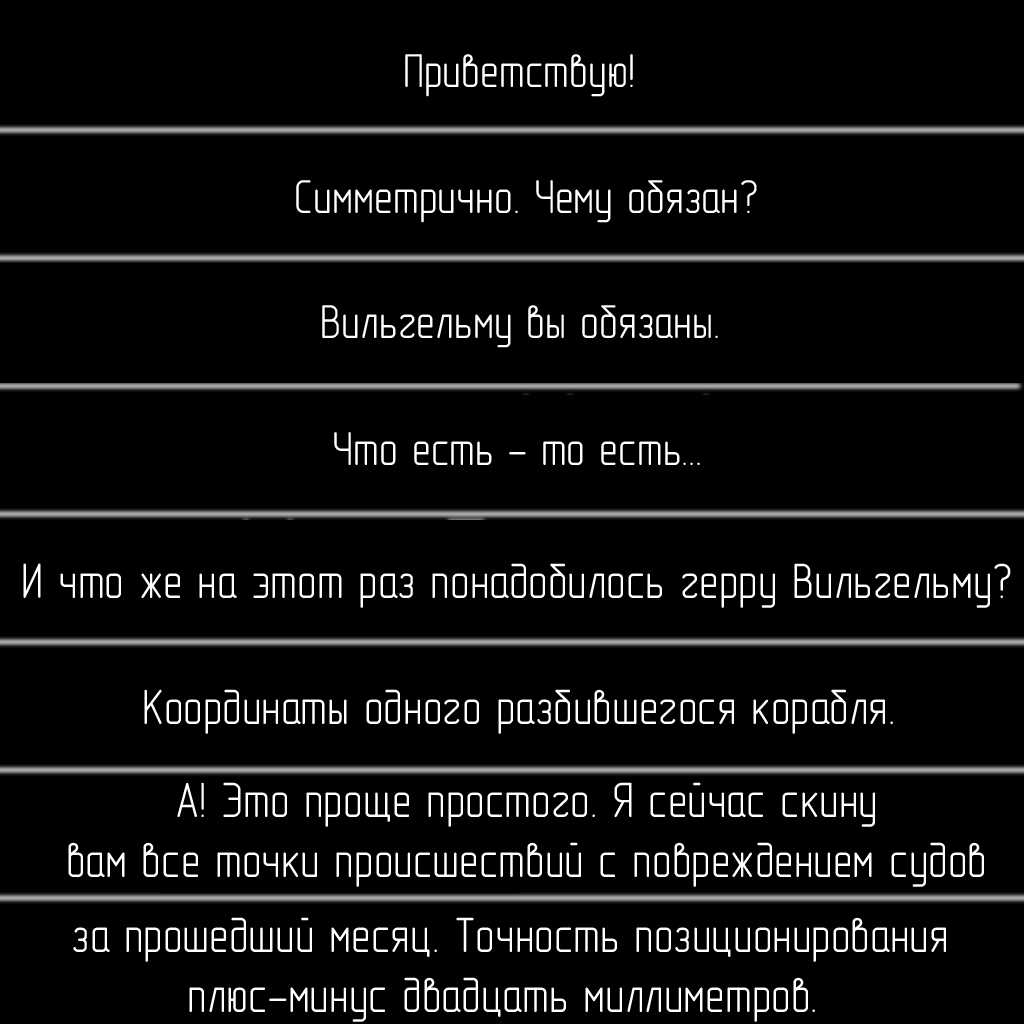
<style>
.page{position:relative;width:1024px;height:1024px;background:#000000}
.page>*{position:absolute;margin:0}
.t1{font:48px "GOST-2.304-81typeA";color:#ffffff}
.t2{font:50px "GOST-2.304-81typeA";color:#ffffff}
</style>
<div class="page">
<p class="t1" style="left:405px;top:54px;width:228px;height:43px">Приветствую!</p>
<p class="t1" style="left:296px;top:180px;width:461px;height:43px">Симметрично. Чему обязан?</p>
<p class="t1" style="left:322px;top:305px;width:396px;height:43px">Вильгельму вы обязаны.</p>
<p class="t1" style="left:334px;top:432px;width:366px;height:33px">Что есть — то есть...</p>
<p class="t2" style="left:23px;top:563px;width:988px;height:45px">И что же на этот раз понадобилось герру Вильгельму?</p>
<p class="t2" style="left:144px;top:689px;width:749px;height:45px">Координаты одного разбившегося корабля.</p>
<p class="t2" style="left:68px;top:782px;width:916px;height:105px;text-align:center">А! Это проще простого. Я сейчас скину<br>вам все точки происшествий с повреждением судов</p>
<p class="t2" style="left:73px;top:917px;width:873px;height:105px;text-align:center">за прошедший месяц. Точность позиционирования<br>плюс-минус двадцать миллиметров.</p>
</div>
